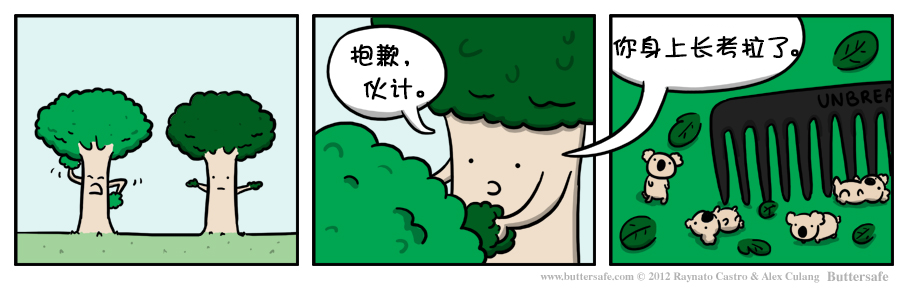
<style>
.page{position:relative;width:908px;height:297px;background:#ffffff}
.page>*{position:absolute;margin:0}
.t1{font:25px "DFShaoNvW5";color:#000000;font-weight:bold}
.t2{font:25px "DFShaoNvW5";letter-spacing:-0.14em;color:#000000;font-weight:bold}
.t3{font:25px/33.3px "DFShaoNvW5";color:#000000;font-weight:bold}
</style>
<div class="page">
<p class="t1" style="left:613px;top:36px;width:186px;height:23px">你身上长考拉<span class="t2">了</span>。</p>
<p class="t3" style="left:350px;top:44px;width:75px;height:56px">抱歉，<br> 伙计。</p>
</div>
